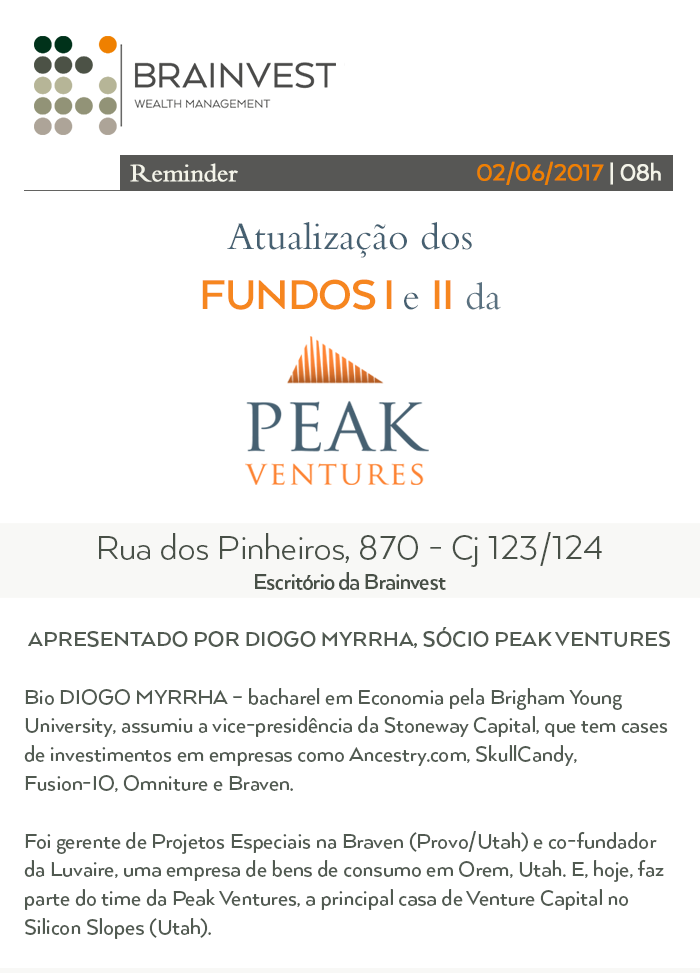
<style>
.page{position:relative;width:700px;height:974px;background:#ffffff}
.page>*{position:absolute;margin:0}
.t1{font:26px "Arquitecta";letter-spacing:-0.025em;color:#ef8000;font-weight:bold}
.t2{font:26px "Arquitecta";letter-spacing:-0.025em;color:#f3f3e9;font-weight:bold}
.t3{font:26px "BemboStd";letter-spacing:-0.025em;color:#f3f3e9;font-weight:bold}
.t4{font:40px/53px "BemboStd";color:#466071}
.t5{font:48px/60px "ArquitectaBold";letter-spacing:-0.025em;color:#f6861f;text-transform:uppercase}
.t6{font:40px/53px "BemboStd";color:#5a7180}
.t7{font:38.2px "ArquitectaBook";color:#485047}
.t8{font:25px "ArquitectaBold";letter-spacing:-0.025em;color:#485047}
.t9{font:24px "ArquitectaMedium";color:#515a51}
.t10{font:24px "ArquitectaBold";color:#515a51;text-transform:uppercase}
.t11{font:24px "ArquitectaMedium";color:#515a51;text-transform:uppercase}
</style>
<div class="page">
<p class="t1" style="left:477px;top:161px;width:184px;height:24px">02/06/2017<span class="t2"> | 08h</span></p>
<p class="t3" style="left:130px;top:163px;width:108px;height:19px">Reminder</p>
<p class="t4" style="left:202px;top:222px;width:299px;height:88px;text-align:center">Atualização dos <br><span class="t5">FundoS I </span>e <span class="t5">II </span><span class="t6">da</span></p>
<p class="t7" style="left:99px;top:532px;width:503px;height:58px;text-align:center">Rua dos Pinheiros, 870 - Cj 123/124<br><span class="t8">Escritório da Brainvest</span></p>
<p class="t9" style="left:24px;top:627px;width:646px;height:312px;text-align:center"><span class="t10">Apresentado por Diogo Myrrha, sócio Peak Ventures<br></span><br>Bio <span class="t11">Diogo Myrrha </span>– bacharel em Economia pela Brigham Young University, assumiu a vice-presidência da Stoneway Capital, que tem cases de investimentos em empresas como Ancestry.com, SkullCandy, Fusion-IO, Omniture e Braven.<br><br>Foi gerente de Projetos Especiais na Braven (Provo/Utah) e co-fundador da Luvaire, uma empresa de bens de consumo em Orem, Utah. E, hoje, faz parte do time da Peak Ventures, a principal casa de Venture Capital no Silicon Slopes (Utah).</p>
</div>
